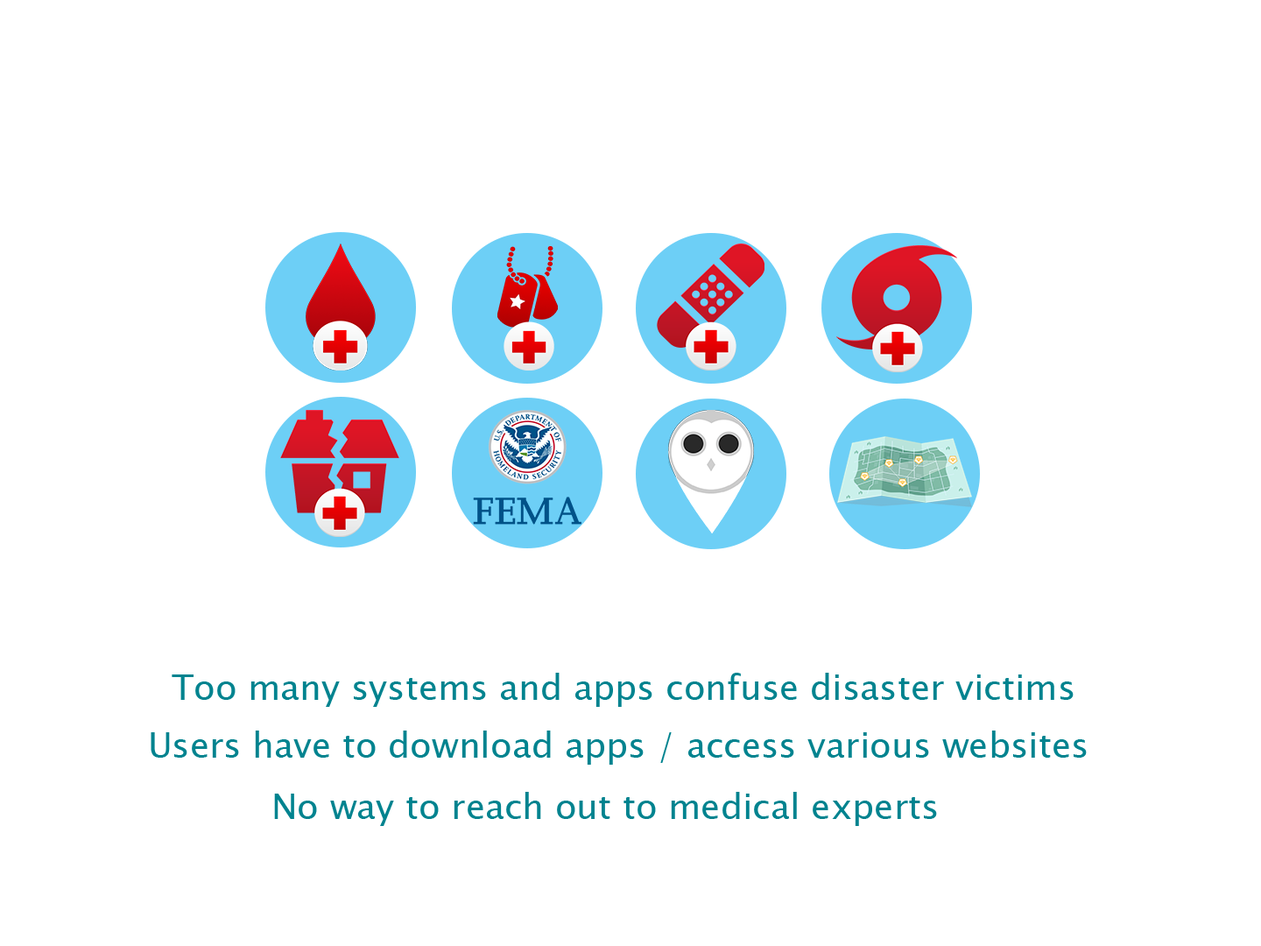
<style>
.page{position:relative;width:1261px;height:946px;background:#ffffff}
.page>*{position:absolute;margin:0}
.t1{font:35px "LucidaSansUnicode";color:#00838f}
</style>
<div class="page">
<p class="t1" style="left:172px;top:672px;width:902px;height:35px">Too many systems and apps confuse disaster victims</p>
<p class="t1" style="left:151px;top:730px;width:936px;height:34px">Users have to download apps / access various websites</p>
<p class="t1" style="left:274px;top:792px;width:663px;height:34px">No way to reach out to medical experts</p>
</div>
